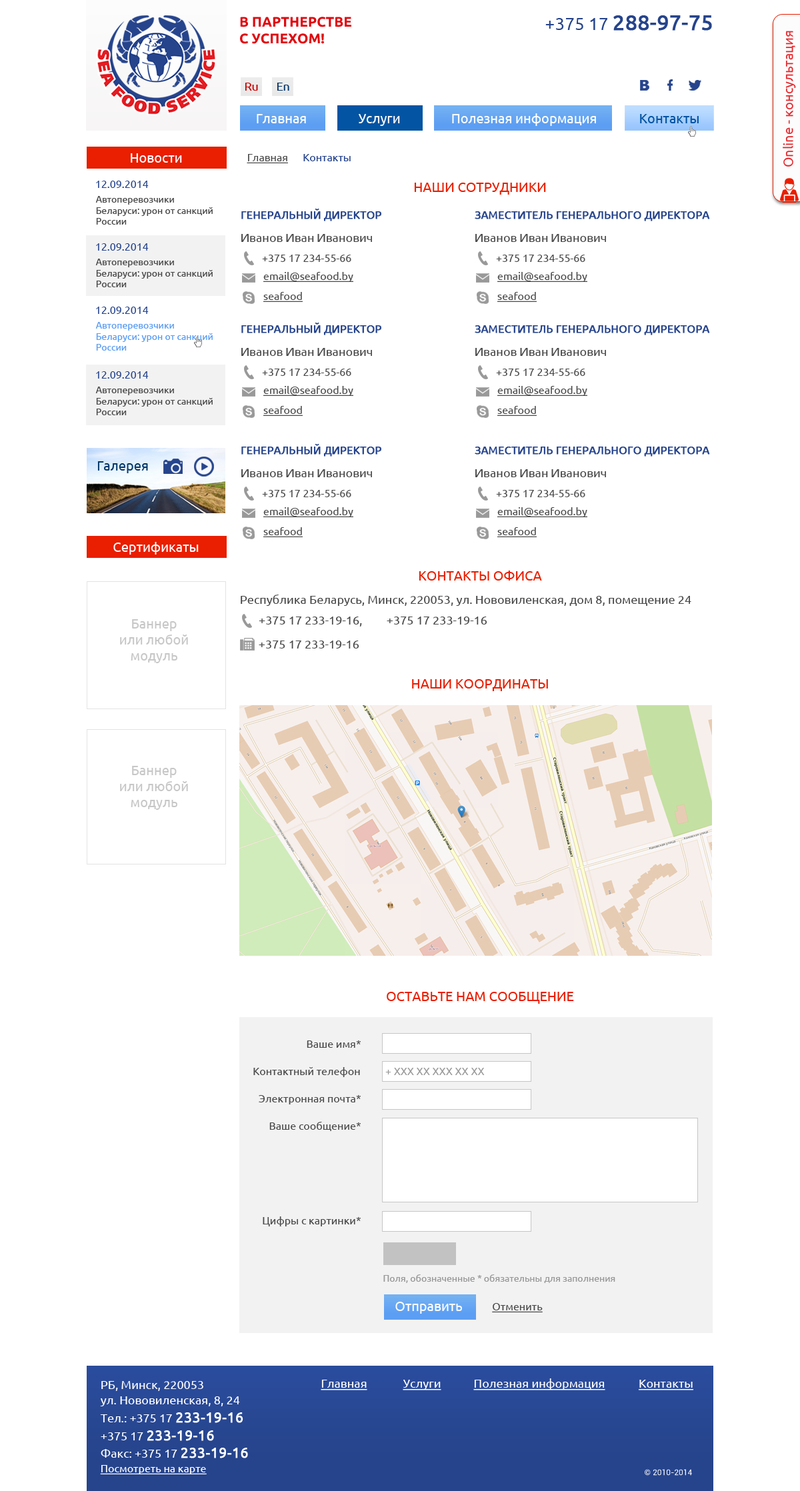
<style>
.page{position:relative;width:800px;height:1491px;background:#ffffff}
.page>*{position:absolute;margin:0}
.t1{font:13.8px "Ubuntu-Bold";color:#e1080e;text-transform:uppercase}
.t2{font:21px "Ubuntu";color:#26448c;font-weight:bold}
.t3{font:17.5px "Ubuntu";color:#26448c}
.t4{font:13.3px "Ubuntu";color:#e52b30}
.t5{font:11.7px "Ubuntu";color:#cc0000}
.t6{font:11.7px "Ubuntu";color:#003366}
.t7{font:13.3px "Ubuntu";color:#ffffff}
.t8{font:13.3px "Ubuntu";color:#0354a3}
.t9{font:10.7px "Ubuntu";color:#26448c}
.t10{font:10.7px "Ubuntu";color:#4a4a4a;text-decoration:underline}
.t11{font:13.3px "Ubuntu";color:#ea1e00;text-transform:uppercase}
.t12{font:9.3px "Ubuntu";color:#4a4a4a}
.t13{font:10.7px "Ubuntu";color:#26448c;text-transform:uppercase;font-weight:bold}
.t14{font:12px "Ubuntu";color:#4a4a4a}
.t15{font:10.7px "Ubuntu";color:#4a4a4a}
.t16{font:9.3px "Ubuntu";color:#5c9ef3}
.t17{font:13.3px "Ubuntu";color:#03386c}
.t18{font:13.3px "Ubuntu";color:#c7c7c7}
.t19{font:10.7px "Ubuntu";color:#999999}
.t20{font:9.3px "Ubuntu";color:#999999}
.t21{font:12px "Ubuntu";color:#ffffff}
.t22{font:12px "Ubuntu";color:#ffffff;text-decoration:underline}
.t23{font:11.9px "Ubuntu";color:#ffffff}
.t24{font:14.3px "Ubuntu";color:#ffffff;font-weight:bold}
.t25{font:10.7px "Ubuntu";color:#ffffff;text-decoration:underline}
.t26{font:8px "Roboto-Regular";color:#ffffff}
</style>
<div class="page">
<p class="t1" style="left:240px;top:17px;width:111px;height:27px">В партнерстве<br>с успехом!</p>
<p class="t2" style="left:545px;top:15px;width:167px;height:16px"><span class="t3">+375 17 </span>288-97-75</p>
<p class="t4" style="left:782px;top:31px;width:14px;height:136px;rotate:-90deg">Online - консультация</p>
<p class="t5" style="left:245px;top:83px;width:13px;height:8px">Ru</p>
<p class="t6" style="left:277px;top:83px;width:12px;height:8px">En</p>
<p class="t7" style="left:257px;top:114px;width:49px;height:9px">Главная</p>
<p class="t7" style="left:359px;top:114px;width:41px;height:12px">Услуги</p>
<p class="t7" style="left:452px;top:113px;width:144px;height:13px">Полезная информация</p>
<p class="t8" style="left:640px;top:114px;width:58px;height:9px">Контакты</p>
<p class="t7" style="left:131px;top:153px;width:51px;height:10px">Новости</p>
<p class="t9" style="left:247px;top:154px;width:104px;height:9px"><span class="t10">Главная      </span>Контакты</p>
<p class="t9" style="left:96px;top:181px;width:53px;height:7px">12.09.2014</p>
<p class="t11" style="left:414px;top:183px;width:132px;height:12px">Наши сотрудники</p>
<p class="t12" style="left:95px;top:196px;width:118px;height:29px">Автоперевозчики Беларуси: урон от санкций России</p>
<p class="t13" style="left:241px;top:209px;width:140px;height:12px">генеральный директор</p>
<p class="t13" style="left:475px;top:211px;width:235px;height:10px">Заместитель генерального директора</p>
<p class="t14" style="left:241px;top:234px;width:131px;height:8px">Иванов Иван Иванович</p>
<p class="t14" style="left:475px;top:234px;width:131px;height:8px">Иванов Иван Иванович</p>
<p class="t9" style="left:96px;top:243px;width:53px;height:8px">12.09.2014</p>
<p class="t15" style="left:262px;top:255px;width:89px;height:7px">+375 17 234-55-66</p>
<p class="t15" style="left:496px;top:255px;width:89px;height:7px">+375 17 234-55-66</p>
<p class="t12" style="left:95px;top:259px;width:118px;height:28px">Автоперевозчики Беларуси: урон от санкций России</p>
<p class="t10" style="left:263px;top:272px;width:90px;height:10px">email@seafood.by</p>
<p class="t10" style="left:497px;top:272px;width:90px;height:10px">email@seafood.by</p>
<p class="t10" style="left:263px;top:292px;width:40px;height:10px">seafood</p>
<p class="t10" style="left:497px;top:292px;width:40px;height:10px">seafood</p>
<p class="t9" style="left:96px;top:307px;width:53px;height:7px">12.09.2014</p>
<p class="t16" style="left:95px;top:322px;width:118px;height:29px">Автоперевозчики Беларуси: урон от санкций России</p>
<p class="t13" style="left:241px;top:323px;width:140px;height:12px">генеральный директор</p>
<p class="t13" style="left:475px;top:325px;width:235px;height:10px">Заместитель генерального директора</p>
<p class="t14" style="left:241px;top:348px;width:131px;height:8px">Иванов Иван Иванович</p>
<p class="t14" style="left:475px;top:348px;width:131px;height:8px">Иванов Иван Иванович</p>
<p class="t9" style="left:96px;top:371px;width:53px;height:8px">12.09.2014</p>
<p class="t15" style="left:262px;top:369px;width:89px;height:7px">+375 17 234-55-66</p>
<p class="t15" style="left:496px;top:369px;width:89px;height:7px">+375 17 234-55-66</p>
<p class="t12" style="left:95px;top:387px;width:118px;height:28px">Автоперевозчики Беларуси: урон от санкций России</p>
<p class="t10" style="left:263px;top:386px;width:90px;height:10px">email@seafood.by</p>
<p class="t10" style="left:497px;top:386px;width:90px;height:10px">email@seafood.by</p>
<p class="t10" style="left:263px;top:406px;width:40px;height:10px">seafood</p>
<p class="t10" style="left:497px;top:406px;width:40px;height:10px">seafood</p>
<p class="t13" style="left:241px;top:444px;width:140px;height:13px">генеральный директор</p>
<p class="t13" style="left:475px;top:447px;width:235px;height:10px">Заместитель генерального директора</p>
<p class="t17" style="left:97px;top:461px;width:51px;height:12px">Галерея</p>
<p class="t14" style="left:241px;top:469px;width:131px;height:8px">Иванов Иван Иванович</p>
<p class="t14" style="left:475px;top:469px;width:131px;height:8px">Иванов Иван Иванович</p>
<p class="t15" style="left:262px;top:490px;width:89px;height:7px">+375 17 234-55-66</p>
<p class="t15" style="left:496px;top:490px;width:89px;height:7px">+375 17 234-55-66</p>
<p class="t10" style="left:263px;top:507px;width:90px;height:10px">email@seafood.by</p>
<p class="t10" style="left:497px;top:507px;width:90px;height:10px">email@seafood.by</p>
<p class="t10" style="left:263px;top:527px;width:40px;height:10px">seafood</p>
<p class="t10" style="left:497px;top:527px;width:40px;height:10px">seafood</p>
<p class="t7" style="left:113px;top:542px;width:86px;height:13px">Сертификаты</p>
<p class="t11" style="left:419px;top:571px;width:123px;height:10px">Контакты офиса</p>
<p class="t14" style="left:241px;top:595px;width:450px;height:11px">Республика Беларусь, Минск, 220053, ул. Нововиленская, дом 8, помещение 24</p>
<p class="t14" style="left:259px;top:617px;width:103px;height:10px">+375 17 233-19-16,</p>
<p class="t14" style="left:387px;top:617px;width:100px;height:8px">+375 17 233-19-16</p>
<p class="t18" style="left:120px;top:619px;width:68px;height:44px;text-align:center">Баннер<br>или любой<br>модуль</p>
<p class="t14" style="left:259px;top:640px;width:100px;height:8px">+375 17 233-19-16</p>
<p class="t11" style="left:412px;top:679px;width:136px;height:12px">наши координаты</p>
<p class="t18" style="left:120px;top:766px;width:68px;height:44px;text-align:center">Баннер<br>или любой<br>модуль</p>
<p class="t11" style="left:387px;top:992px;width:187px;height:12px">оставьте нам сообщение</p>
<p class="t15" style="left:307px;top:1040px;width:54px;height:8px">Ваше имя*</p>
<p class="t15" style="left:253px;top:1067px;width:107px;height:10px">Контактный телефон</p>
<p class="t19" style="left:385px;top:1068px;width:100px;height:7px">+ ХХХ ХХ ХХХ ХХ ХХ</p>
<p class="t15" style="left:259px;top:1095px;width:102px;height:9px">Электронная почта*</p>
<p class="t15" style="left:269px;top:1122px;width:92px;height:9px">Ваше сообщение*</p>
<p class="t15" style="left:263px;top:1216px;width:98px;height:10px">Цифры с картинки*</p>
<p class="t20" style="left:383px;top:1274px;width:232px;height:9px">Поля, обозначенные * обязательны для заполнения</p>
<p class="t7" style="left:395px;top:1302px;width:67px;height:12px">Отправить</p>
<p class="t10" style="left:492px;top:1303px;width:51px;height:9px">Отменить</p>
<p class="t21" style="left:101px;top:1381px;width:102px;height:10px">РБ, Минск, 220053</p>
<p class="t22" style="left:321px;top:1380px;width:46px;height:10px">Главная</p>
<p class="t22" style="left:403px;top:1380px;width:38px;height:10px">Услуги</p>
<p class="t22" style="left:473px;top:1378px;width:132px;height:12px">Полезная информация</p>
<p class="t22" style="left:638px;top:1380px;width:55px;height:10px">Контакты</p>
<p class="t21" style="left:100px;top:1396px;width:140px;height:10px">ул. Нововиленская, 8, 24</p>
<p class="t23" style="left:100px;top:1412px;width:143px;height:11px">Тел.: +375 17 <span class="t24">233-19-16</span></p>
<p class="t24" style="left:101px;top:1430px;width:113px;height:11px"><span class="t23">+375 17 </span>233-19-16</p>
<p class="t23" style="left:101px;top:1448px;width:147px;height:10px">Факс: +375 17 <span class="t24">233-19-16</span></p>
<p class="t25" style="left:100px;top:1465px;width:107px;height:9px">Посмотреть на карте</p>
<p class="t26" style="left:644px;top:1469px;width:48px;height:7px">© 2010-2014</p>
</div>
